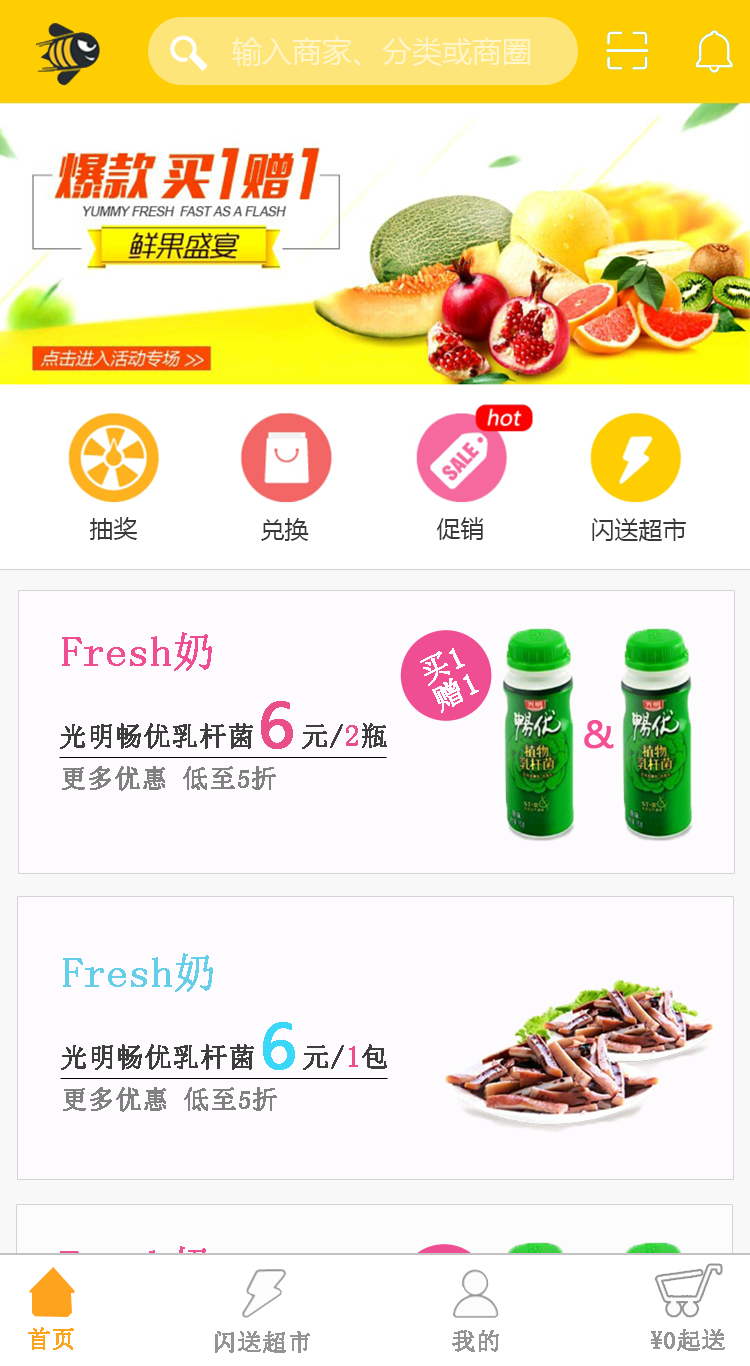
<style>
.page{position:relative;width:750px;height:1366px;background:#fdfbfe}
.page>*{position:absolute;margin:0}
.t1{font:30px "MicrosoftYaHei";color:#fff5c9}
.t2{font:24px "MicrosoftYaHei";color:#393939}
.t3{font:42px "SimSun";color:#f04e92;font-weight:bold}
.t4{font:30px "SimSun";color:#ffffff;font-weight:bold}
.t5{font:60px "MicrosoftYaHei";color:#eb4f89;font-weight:bold}
.t6{font:27px "SimSun";color:#3e3e3e;font-weight:bold}
.t7{font:30px "SimSun";color:#eb4f89;font-weight:bold}
.t8{font:36px "MicrosoftYaHei";color:#f44e94;font-weight:bold}
.t9{font:26px "SimSun";color:#818181;font-weight:bold}
.t10{font:42px "SimSun";color:#66cee6;font-weight:bold}
.t11{font:60px "MicrosoftYaHei";color:#3bd7f9;font-weight:bold}
.t12{font:24px "SimSun";color:#fea31e;font-weight:bold}
.t13{font:24px "SimSun";color:#949494;font-weight:bold}
</style>
<div class="page">
<p class="t1" style="left:232px;top:36px;width:298px;height:30px">输入商家、分类或商圈</p>
<p class="t2" style="left:89px;top:517px;width:49px;height:23px">抽奖</p>
<p class="t2" style="left:261px;top:518px;width:48px;height:23px">兑换</p>
<p class="t2" style="left:437px;top:517px;width:47px;height:23px">促销</p>
<p class="t2" style="left:592px;top:518px;width:94px;height:24px">闪送超市</p>
<p class="t3" style="left:62px;top:632px;width:150px;height:39px">Fresh奶</p>
<p class="t4" style="left:420px;top:648px;width:45px;height:38px;rotate:-25deg">买1</p>
<p class="t4" style="left:432px;top:674px;width:47px;height:39px;rotate:-25deg">赠1</p>
<p class="t5" style="left:261px;top:701px;width:32px;height:48px">6</p>
<p class="t6" style="left:60px;top:723px;width:327px;height:26px">光明畅优乳杆菌   元/<span class="t7">2</span>瓶</p>
<p class="t8" style="left:584px;top:720px;width:30px;height:29px">&amp;</p>
<p class="t9" style="left:62px;top:766px;width:214px;height:25px">更多优惠 低至5折</p>
<p class="t10" style="left:63px;top:953px;width:150px;height:39px">Fresh奶</p>
<p class="t11" style="left:263px;top:1022px;width:32px;height:48px">6</p>
<p class="t6" style="left:61px;top:1044px;width:326px;height:26px">光明畅优乳杆菌   元/<span class="t7">1</span>包</p>
<p class="t9" style="left:63px;top:1087px;width:214px;height:25px">更多优惠 低至5折</p>
<p class="t12" style="left:28px;top:1327px;width:46px;height:23px">首页</p>
<p class="t13" style="left:215px;top:1331px;width:95px;height:22px">闪送超市</p>
<p class="t13" style="left:452px;top:1330px;width:47px;height:22px">我的</p>
<p class="t13" style="left:651px;top:1329px;width:74px;height:22px">¥0起送</p>
</div>
